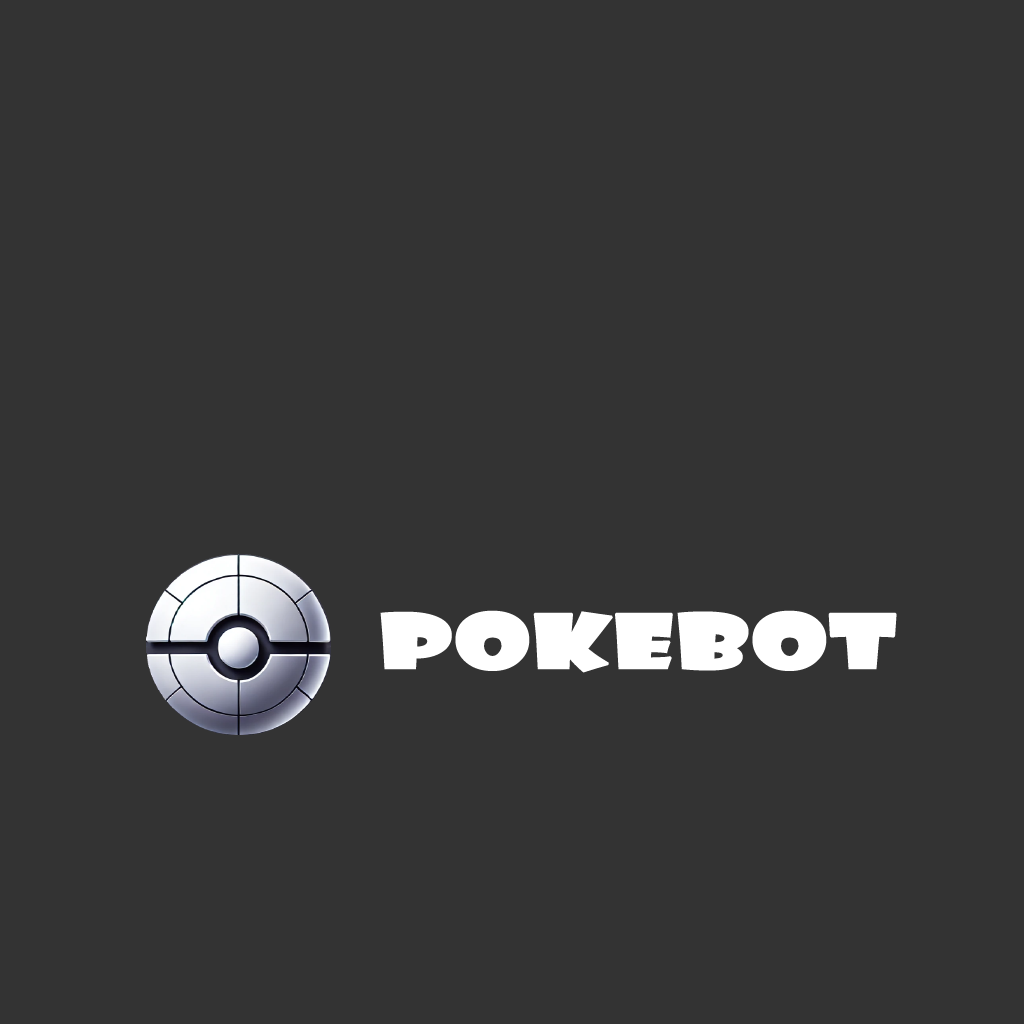
<style>
.page{position:relative;width:1024px;height:1024px;background:#333333}
.page>*{position:absolute;margin:0}
.t1{font:72px "ShowcardGothic-Reg";color:#ffffff;font-weight:bold;scale:1.5 1}
</style>
<div class="page">
<p class="t1" style="left:380px;top:610px;width:517px;height:63px">PokeBot</p>
</div>
